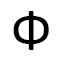
<style>
.page{position:relative;width:64px;height:64px;background:#ffffff}
.page>*{position:absolute;margin:0}
.t1{font:58.3px "Calibri";color:#000000}
</style>
<div class="page">
<p class="t1" style="left:13px;top:11px;width:36px;height:39px">Ф</p>
</div>
